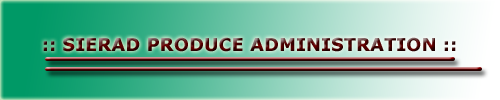
<style>
.page{position:relative;width:500px;height:100px}
.page>*{position:absolute;margin:0}
.t1{font:18px "Verdana-Bold"}
</style>
<div class="page">
<p class="t1" style="left:43px;top:37px;width:413px;height:15px">:: SIERAD PRODUCE ADMINISTRATION ::</p>
</div>
